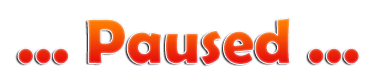
<style>
.page{position:relative;width:376px;height:83px;background:#ffffff}
.page>*{position:absolute;margin:0}
.t1{font:63px "BerlinSansFBDemi-Bold"}
</style>
<div class="page">
<p class="t1" style="left:18px;top:18px;width:341px;height:47px">... Paused ...</p>
</div>
